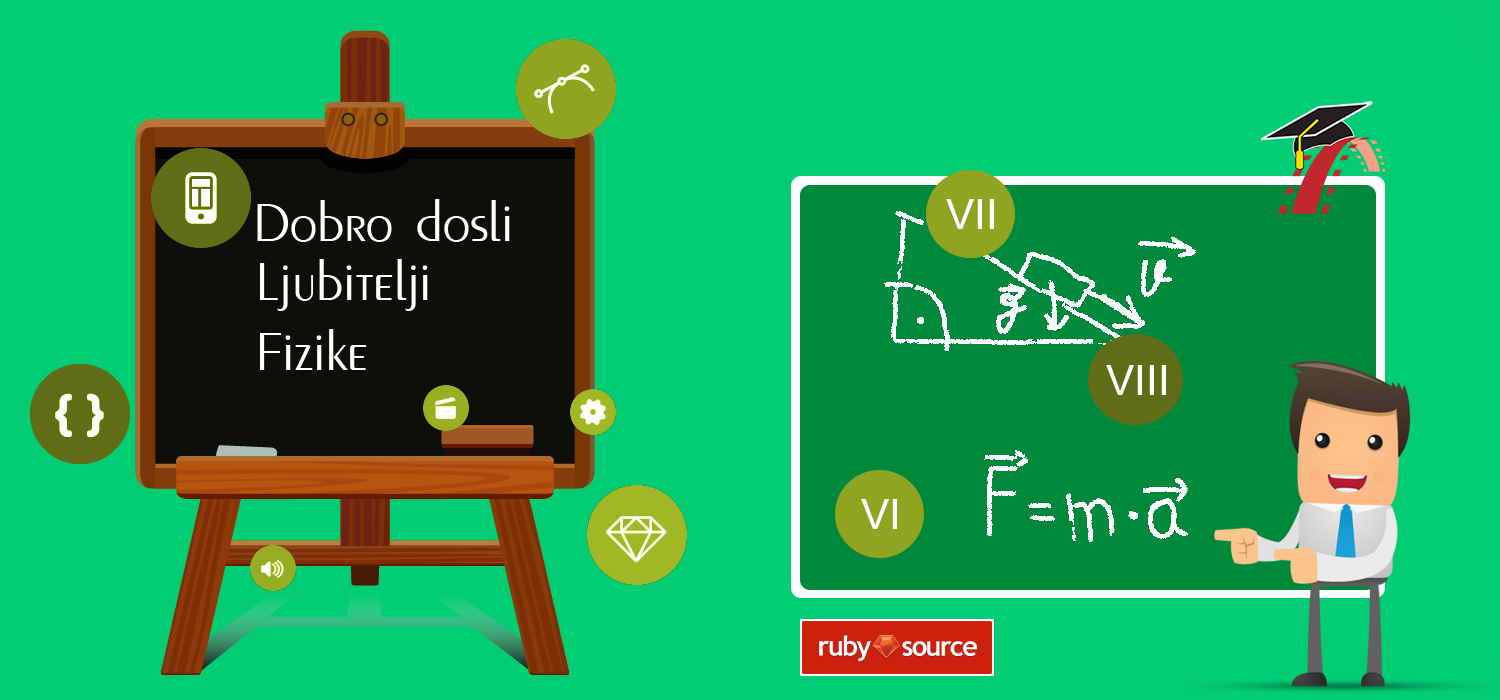
<style>
.page{position:relative;width:1500px;height:700px;background:#02cc74}
.page>*{position:absolute;margin:0}
.t1{font:58.3px "PenguinLightYU";color:#ffffff}
.t2{font:45.8px "Gautami";color:#ffffff}
</style>
<div class="page">
<p class="t1" style="left:257px;top:199px;width:253px;height:43px">Dobro dosli</p>
<p class="t2" style="left:946px;top:199px;width:48px;height:30px">VII</p>
<p class="t1" style="left:260px;top:259px;width:168px;height:111px">Ljubitelji<br>Fizike</p>
<p class="t2" style="left:1106px;top:365px;width:60px;height:30px">VIII</p>
<p class="t2" style="left:861px;top:499px;width:36px;height:30px">VI</p>
</div>
